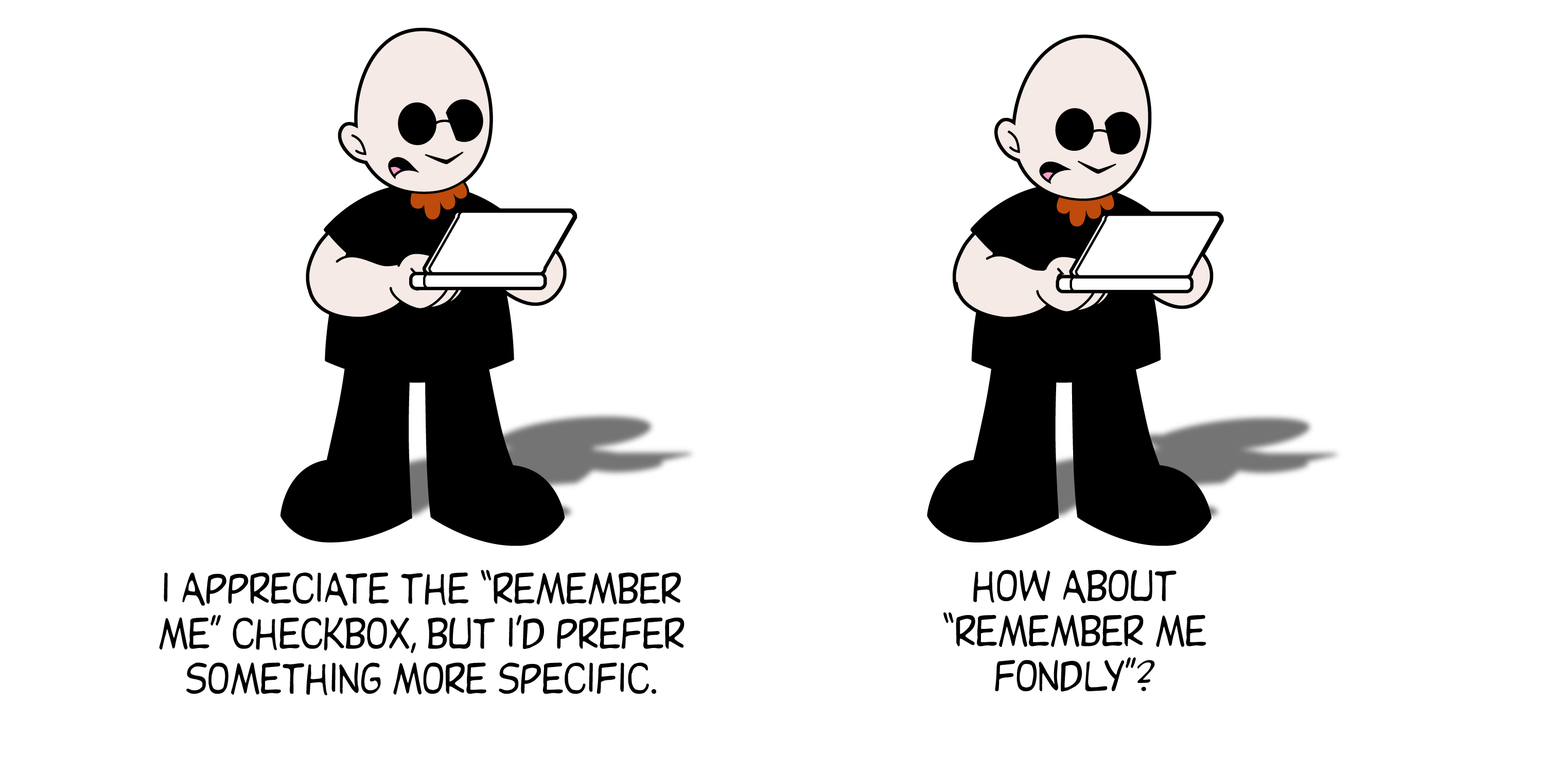
<style>
.page{position:relative;width:1544px;height:772px;background:#ffffff}
.page>*{position:absolute;margin:0}
.t1{font:45px/45px "Dupuy";color:#000000}
</style>
<div class="page">
<p class="t1" style="left:159px;top:570px;width:526px;height:125px;text-align:center">I APPRECIATE THE “REMEMBER<br>ME” CHECKBOX, BUT I’D PREFER<br>SOMETHING MORE SPECIFIC.</p>
<p class="t1" style="left:944px;top:570px;width:262px;height:122px;text-align:center">HOW ABOUT<br>“REMEMBER ME<br>FONDLY”?</p>
</div>
